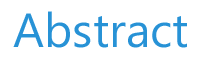
<style>
.page{position:relative;width:219px;height:61px;background:#ffffff}
.page>*{position:absolute;margin:0}
.t1{font:48px "LaoUI";color:#2792d6}
</style>
<div class="page">
<p class="t1" style="left:13px;top:11px;width:174px;height:37px">Abstract</p>
</div>
